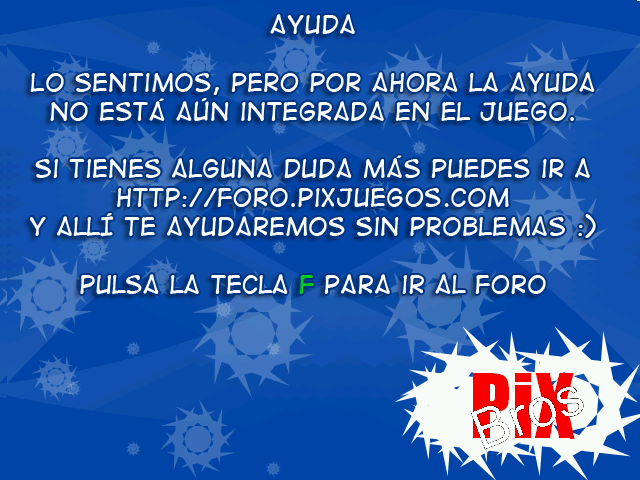
<style>
.page{position:relative;width:640px;height:480px}
.page>*{position:absolute;margin:0}
.t1{font:24px "DigitalStrip2";color:#ffffff}
.t2{font:24px "DigitalStrip2";color:#00cc1d}
</style>
<div class="page">
<p class="t1" style="left:29px;top:14px;width:567px;height:280px;text-align:center">AYUDA<br><br>Lo sentimos, pero por ahora la ayuda no está aún integrada en el juego.<br><br>si tienes alguna duda más puedes ir a http://foro.pixjuegos.com<br>y allí te ayudaremos sin problemas :)<br><br>pulsa la tecla <span class="t2">F </span>para ir al foro</p>
</div>
